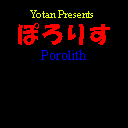
<style>
.page{position:relative;width:128px;height:128px;background:#000000}
.page>*{position:absolute;margin:0}
.t1{font:11px "TimesNewRomanPSMT";color:#e4ff00}
.t2{font:24px "HGSSoeiKakupoptai";color:#ff0000}
.t3{font:14px "TimesNewRomanPSMT";color:#0000ff}
</style>
<div class="page">
<p class="t1" style="left:30px;top:10px;width:63px;height:8px">Yotan Presents</p>
<p class="t2" style="left:18px;top:23px;width:92px;height:22px">ぽろりす</p>
<p class="t3" style="left:41px;top:50px;width:45px;height:10px">Porolith</p>
</div>
